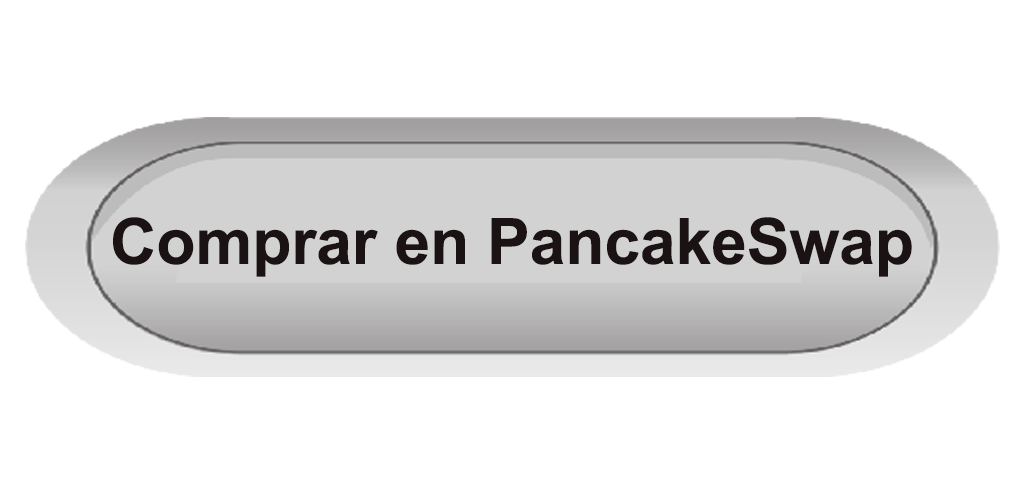
<style>
.page{position:relative;width:1024px;height:493px;background:#ffffff}
.page>*{position:absolute;margin:0}
.t1{font:64px "Arial-BoldMT";color:#1b1313}
</style>
<div class="page">
<p class="t1" style="left:113px;top:217px;width:799px;height:60px">Comprar en PancakeSwap</p>
</div>
